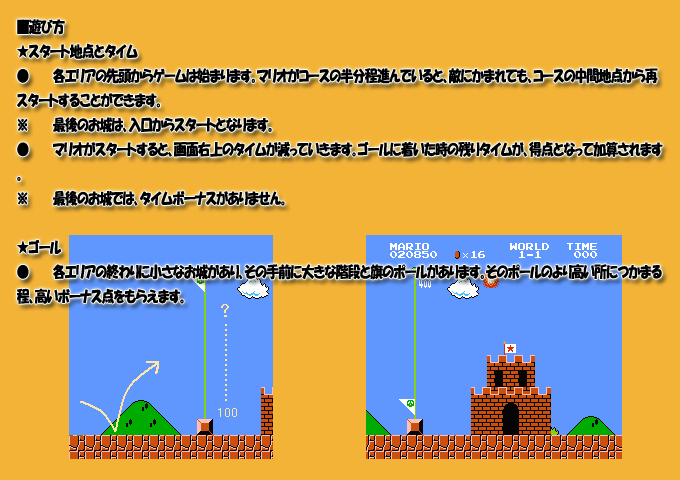
<style>
.page{position:relative;width:680px;height:480px;background:#f3b337}
.page>*{position:absolute;margin:0}
.t1{font:15.4px "HGPSoeiKakupoptai";letter-spacing:-0.015em;color:#000000;scale:0.82 1}
</style>
<div class="page">
<p class="t1" style="left:17px;top:19px;width:646px;height:285px">■遊び方<br>★スタート地点とタイム<br>● 各エリアの先頭からゲームは始まります。マリオがコースの半分程進んでいると、敵にかまれても、コースの中間地点から再スタートすることができます。<br>※ 最後のお城は、入口からスタートとなります。<br>● マリオがスタートすると、画面右上のタイムが減っていきます。ゴールに着いた時の残りタイムが、得点となって加算されます。<br>※ 最後のお城では、タイムボーナスがありません。<br><br>★ゴール<br>● 各エリアの終わりに小さなお城があり、その手前に大きな階段と旗のポールがあります。そのポールのより高い所につかまる程、高いボーナス点をもらえます。</p>
</div>
